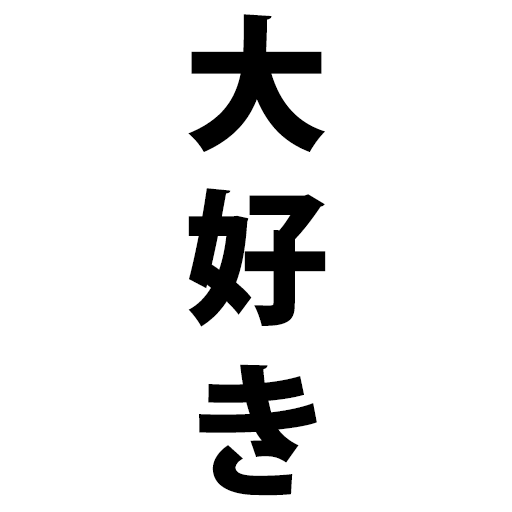
<style>
.page{position:relative;width:512px;height:512px;background:#ffffff}
.page>*{position:absolute;margin:0}
.t1{font:144.8px "KozGoPr6N-Heavy";color:#000000}
</style>
<div class="page">
<p class="t1" style="left:188px;top:14px;width:138px;height:482px;text-align:center">大<br>好<br>き</p>
</div>
